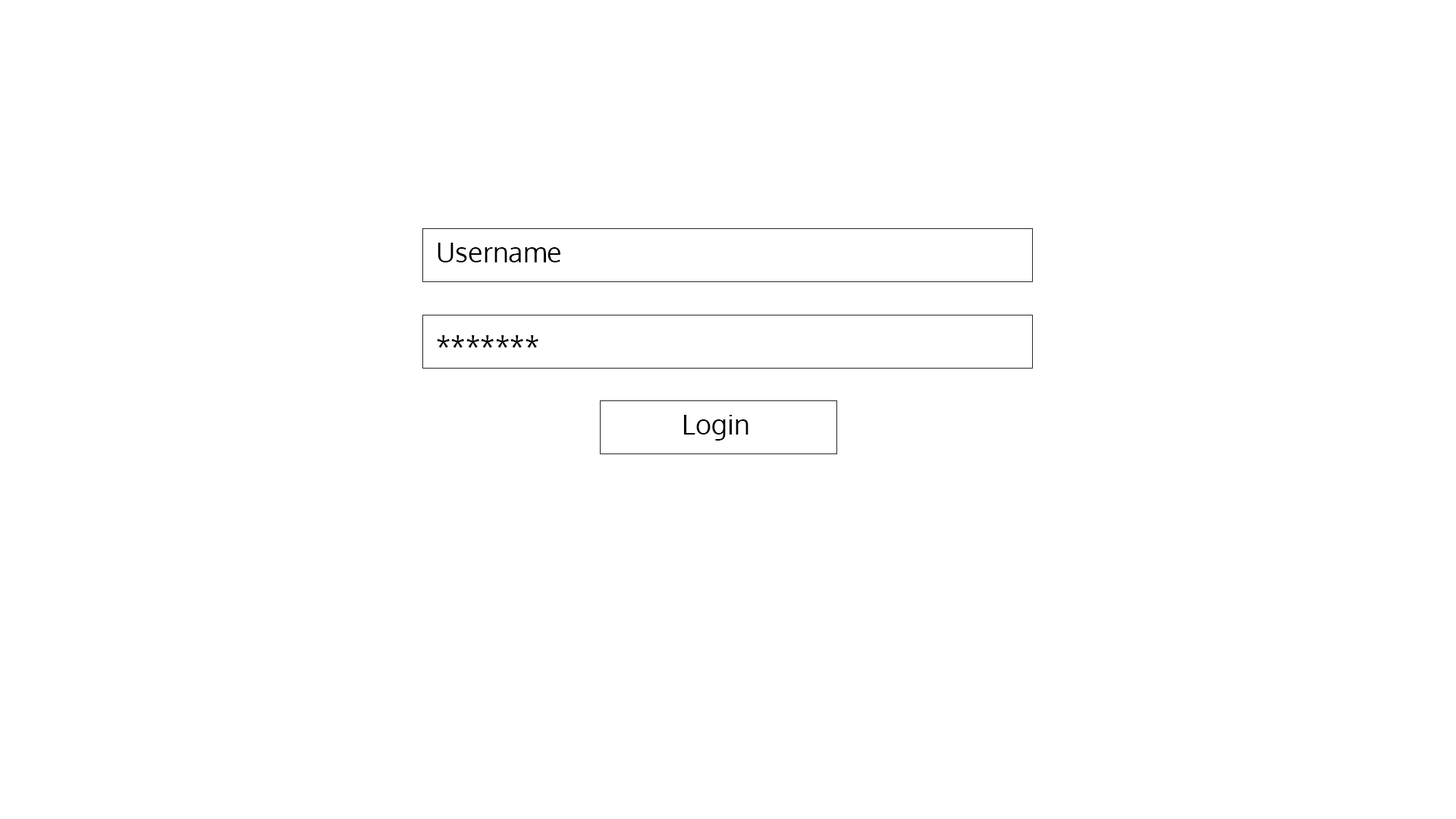
<style>
.page{position:relative;width:1456px;height:819px;background:#ffffff}
.page>*{position:absolute;margin:0}
.t1{font:27.3px "Oxygen-Regular";color:#000000}
</style>
<div class="page">
<p class="t1" style="left:438px;top:243px;width:122px;height:19px">Username</p>
<p class="t1" style="left:437px;top:335px;width:101px;height:13px">*******</p>
<p class="t1" style="left:684px;top:415px;width:64px;height:26px">Login</p>
</div>
